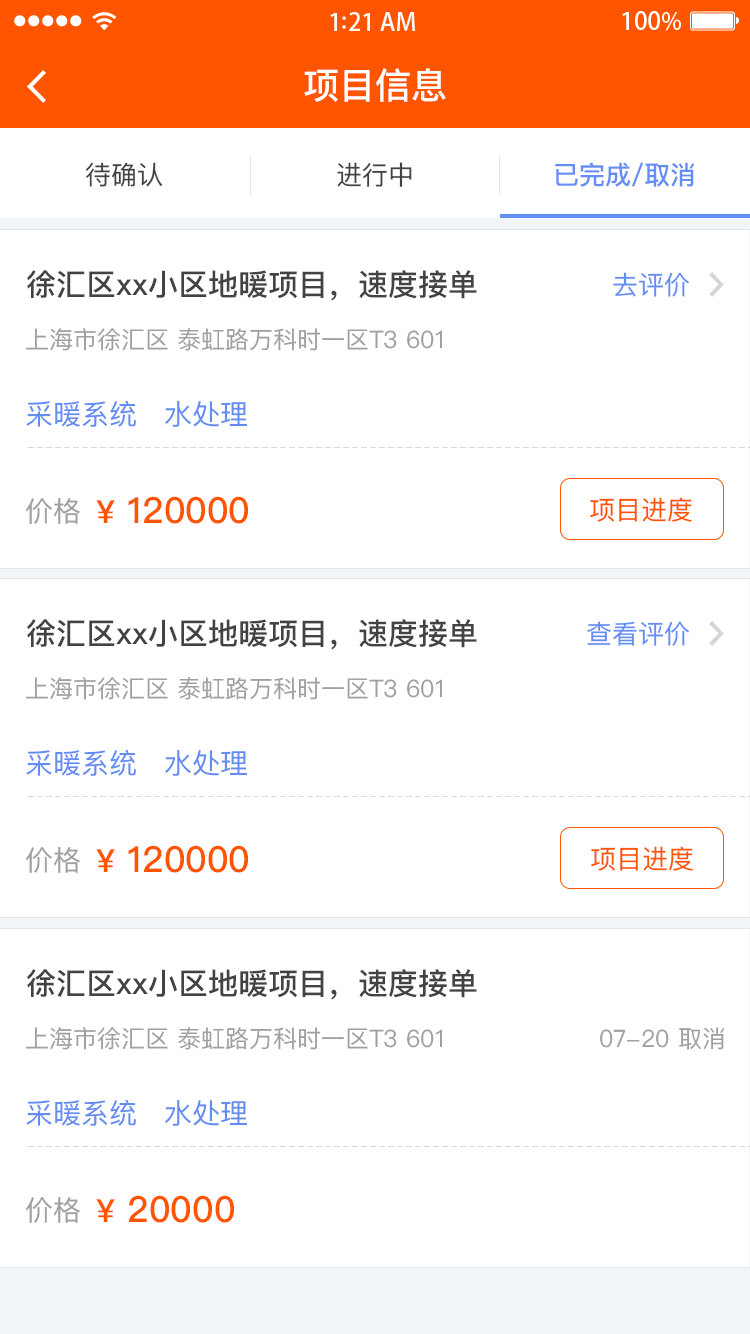
<style>
.page{position:relative;width:750px;height:1334px;background:#ffffff}
.page>*{position:absolute;margin:0}
.t1{font:36px "PingFangSC-Medium";color:#ffffff}
.t2{font:26px "PingFangSC-Regular";color:#434343}
.t3{font:26px "PingFangSC-Medium";color:#648df6}
.t4{font:30px "PingFangSC-Medium";color:#434343}
.t5{font:26px "PingFangSC-Regular";color:#648df6}
.t6{font:24px "PingFangSC-Regular";color:#a0a0a0}
.t7{font:28px "PingFangSC-Regular";color:#648df4}
.t8{font:36px "PingFangSC-Medium";color:#ff5400}
.t9{font:32px "PingFangSC-Medium";color:#ff5400}
.t10{font:26px "PingFangSC-Regular";color:#ff5400}
.t11{font:28px "PingFangSC-Regular";color:#a0a0a0}
</style>
<div class="page">
<p class="t1" style="left:304px;top:68px;width:142px;height:34px">项目信息</p>
<p class="t2" style="left:86px;top:162px;width:77px;height:25px">待确认</p>
<p class="t2" style="left:337px;top:162px;width:75px;height:25px">进行中</p>
<p class="t3" style="left:555px;top:162px;width:140px;height:25px">已完成/取消</p>
<p class="t4" style="left:27px;top:270px;width:450px;height:31px">徐汇区xx小区地暖项目，速度接单</p>
<p class="t5" style="left:613px;top:272px;width:76px;height:25px">去评价</p>
<p class="t6" style="left:26px;top:328px;width:416px;height:23px">上海市徐汇区 泰虹路万科时一区T3 601</p>
<p class="t7" style="left:26px;top:400px;width:110px;height:27px">采暖系统</p>
<p class="t7" style="left:165px;top:400px;width:82px;height:27px">水处理</p>
<p class="t8" style="left:96px;top:496px;width:152px;height:28px"><span class="t9">¥</span> 120000</p>
<p class="t10" style="left:590px;top:497px;width:102px;height:25px">项目进度</p>
<p class="t11" style="left:26px;top:498px;width:54px;height:26px">价格</p>
<p class="t4" style="left:27px;top:619px;width:450px;height:31px">徐汇区xx小区地暖项目，速度接单</p>
<p class="t5" style="left:587px;top:621px;width:102px;height:25px">查看评价</p>
<p class="t6" style="left:26px;top:677px;width:416px;height:23px">上海市徐汇区 泰虹路万科时一区T3 601</p>
<p class="t7" style="left:26px;top:749px;width:110px;height:27px">采暖系统</p>
<p class="t7" style="left:165px;top:749px;width:82px;height:27px">水处理</p>
<p class="t8" style="left:96px;top:845px;width:152px;height:28px"><span class="t9">¥</span> 120000</p>
<p class="t10" style="left:591px;top:846px;width:102px;height:25px">项目进度</p>
<p class="t11" style="left:26px;top:847px;width:54px;height:26px">价格</p>
<p class="t4" style="left:27px;top:969px;width:450px;height:31px">徐汇区xx小区地暖项目，速度接单</p>
<p class="t6" style="left:26px;top:1027px;width:416px;height:23px">上海市徐汇区 泰虹路万科时一区T3 601</p>
<p class="t6" style="left:600px;top:1027px;width:125px;height:23px">07-20 取消</p>
<p class="t7" style="left:26px;top:1099px;width:110px;height:27px">采暖系统</p>
<p class="t7" style="left:165px;top:1099px;width:82px;height:27px">水处理</p>
<p class="t11" style="left:26px;top:1197px;width:54px;height:26px">价格</p>
<p class="t8" style="left:96px;top:1195px;width:138px;height:28px"><span class="t9">¥</span> 20000</p>
</div>
